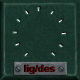
<style>
.page{position:relative;width:80px;height:80px;background:#183129}
.page>*{position:absolute;margin:0}
.t1{font:10px "Arial-BoldMT";color:#420303}
</style>
<div class="page">
<p class="t1" style="left:25px;top:64px;width:31px;height:10px">lig/des</p>
</div>
